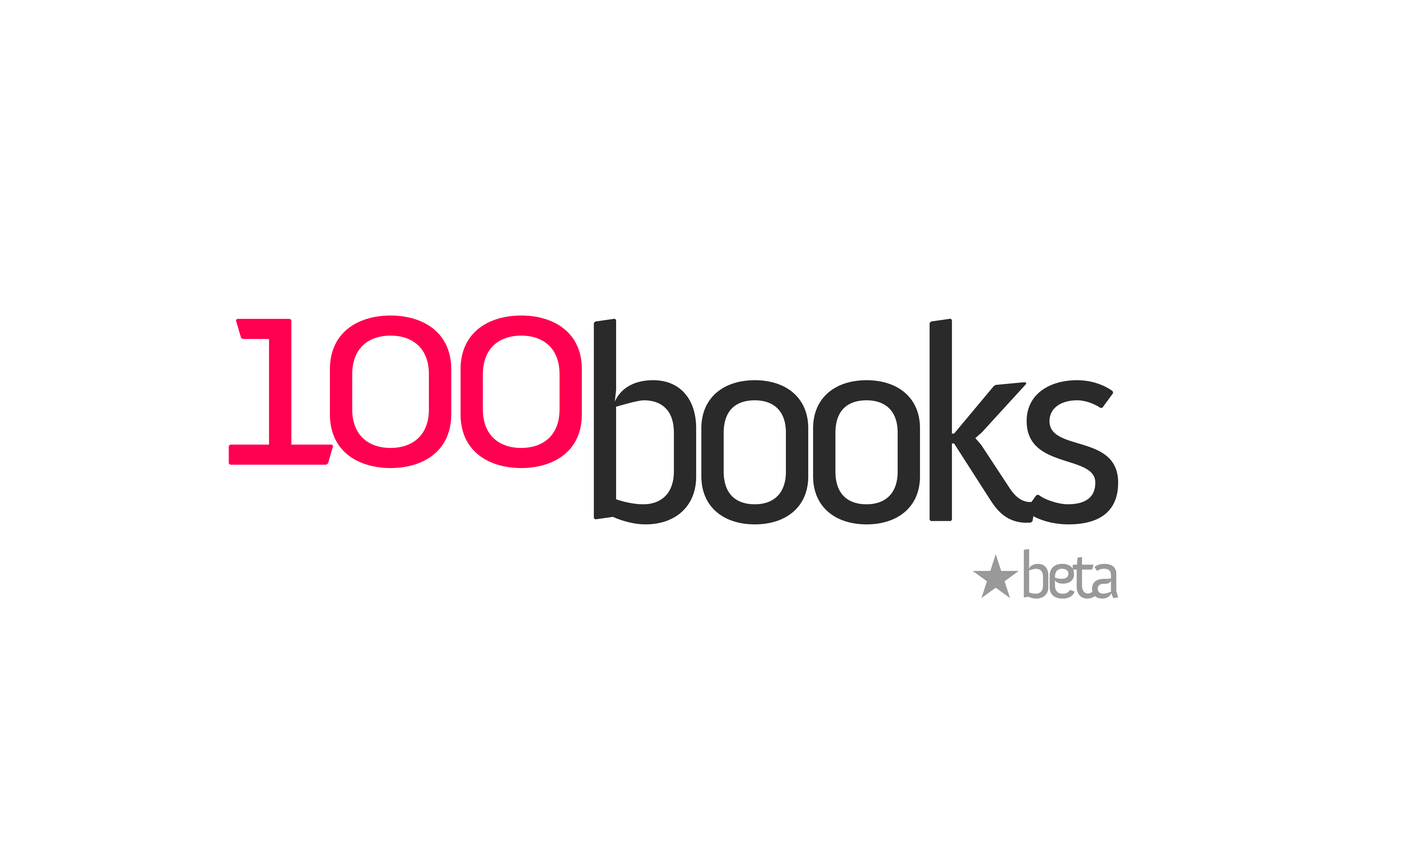
<style>
.page{position:relative;width:1401px;height:851px;background:#ffffff}
.page>*{position:absolute;margin:0}
.t1{font:278.1px "Anivers-Regular";letter-spacing:-0.1em;color:#ff0050}
.t2{font:278.1px "Anivers-Regular";letter-spacing:-0.1em;color:#292929}
.t3{font:66.7px "Anivers-Regular";letter-spacing:-0.1em;color:#999999}
</style>
<div class="page">
<p class="t1" style="left:229px;top:315px;width:353px;height:153px">100</p>
<p class="t2" style="left:594px;top:319px;width:524px;height:206px">books</p>
<p class="t3" style="left:1024px;top:549px;width:94px;height:50px">beta</p>
</div>
